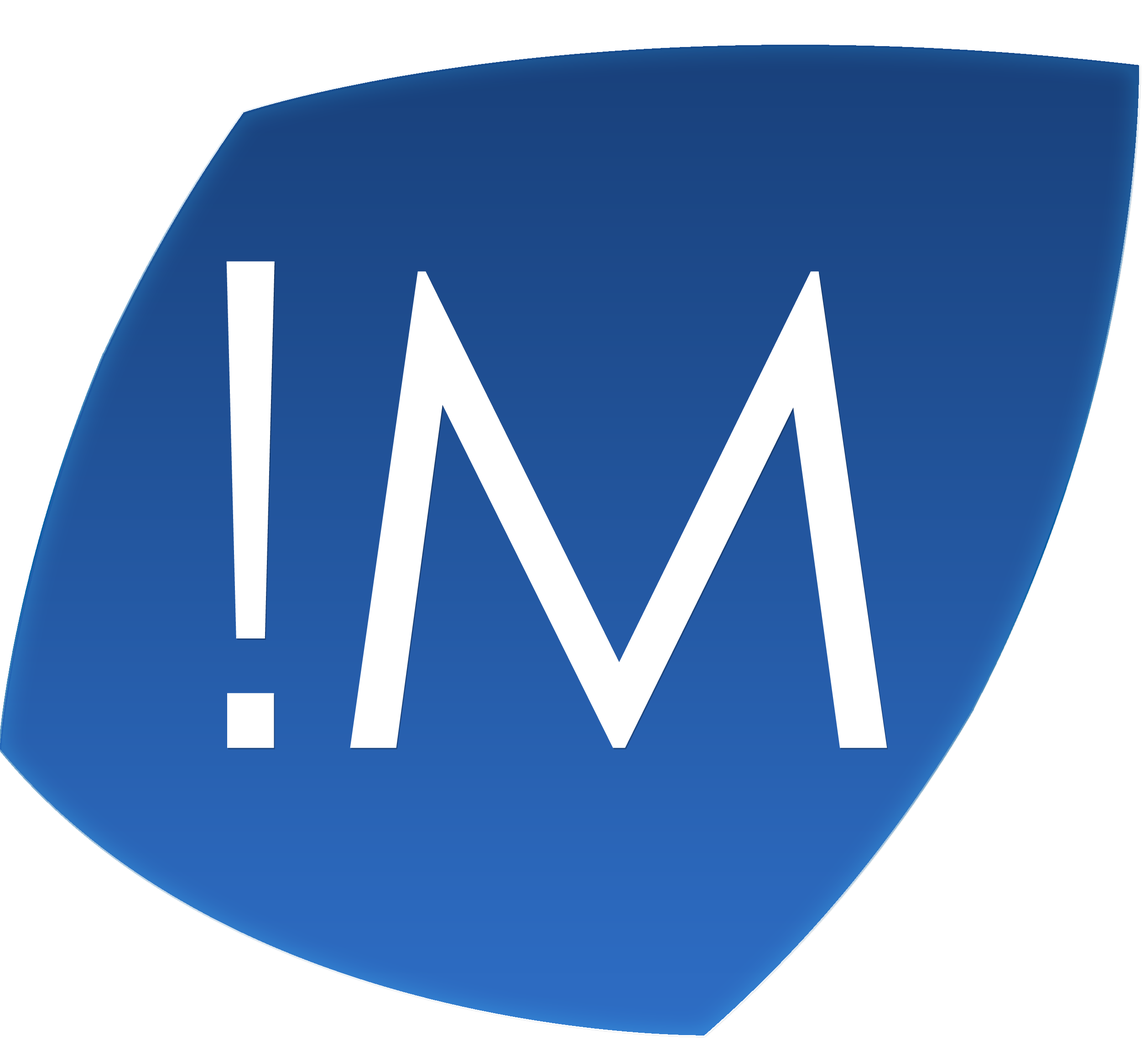
<style>
.page{position:relative;width:1145px;height:1041px;background:#ffffff}
.page>*{position:absolute;margin:0}
.t1{font:636.5px "AgencyFB-Reg";color:#ffffff}
.t2{font:663.2px "CenturyGothic";letter-spacing:-0.1em;color:#ffffff}
</style>
<div class="page">
<p class="t1" style="left:226px;top:261px;width:662px;height:487px">!<span class="t2">M</span></p>
</div>
